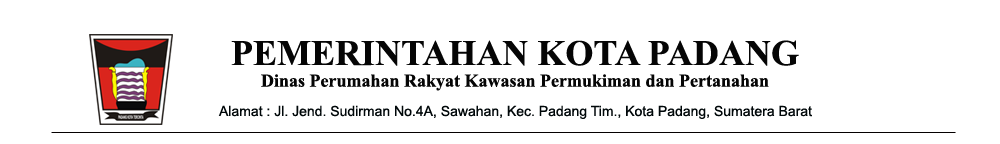
<style>
.page{position:relative;width:1000px;height:144px;background:#ffffff}
.page>*{position:absolute;margin:0}
.t1{font:18px "TimesNewRomanPS-BoldMT";color:#050505}
.t2{font:36px "TimesNewRomanPS-BoldMT";color:#050505}
.t3{font:14px "ArialMT";color:#000709}
</style>
<div class="page">
<p class="t1" style="left:231px;top:40px;width:568px;height:51px;text-align:center"><span class="t2">PEMERINTAHAN KOTA PADANG<br></span>Dinas Perumahan Rakyat Kawasan Permukiman dan Pertanahan</p>
<p class="t3" style="left:218px;top:105px;width:594px;height:14px">Alamat : Jl. Jend. Sudirman No.4A, Sawahan, Kec. Padang Tim., Kota Padang, Sumatera Barat</p>
</div>
